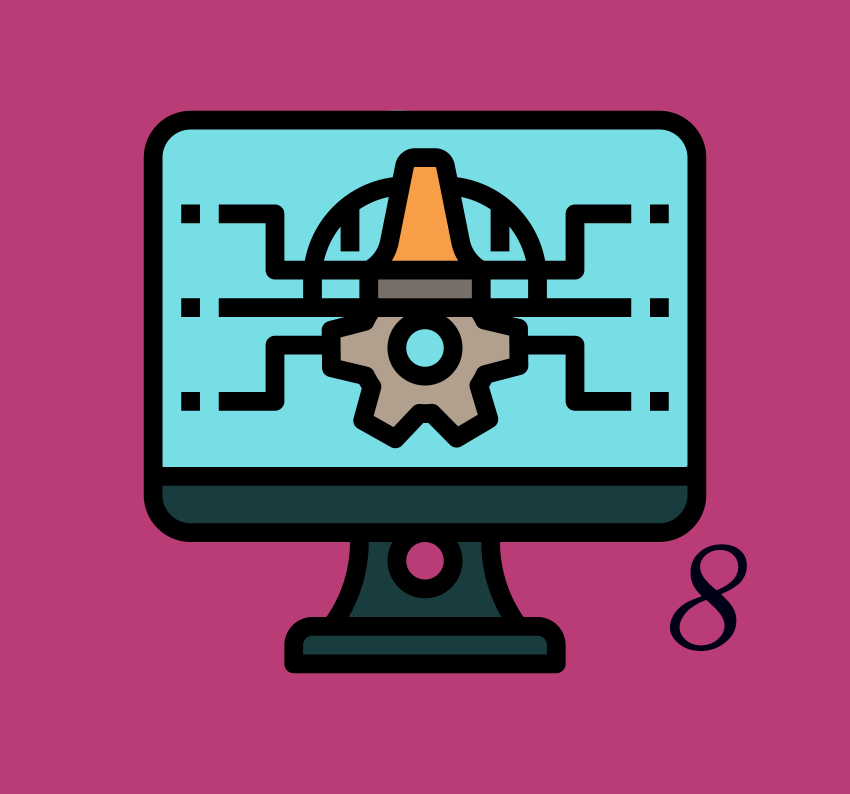
<style>
.page{position:relative;width:850px;height:794px;background:#b93c76}
.page>*{position:absolute;margin:0}
.t1{font:151.5px "CenturySchoolbook-Italic";color:#000116}
</style>
<div class="page">
<p class="t1" style="left:670px;top:544px;width:77px;height:107px">8</p>
</div>
